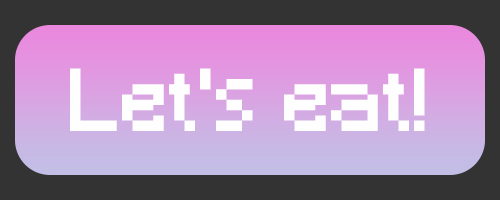
<style>
.page{position:relative;width:500px;height:200px;background:#333333}
.page>*{position:absolute;margin:0}
.t1{font:83.3px "Minecraft";color:#fefefe}
</style>
<div class="page">
<p class="t1" style="left:70px;top:68px;width:355px;height:63px">Let's eat!</p>
</div>
